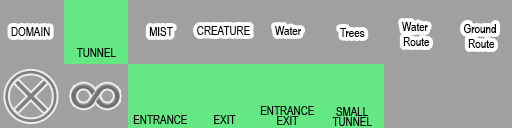
<style>
.page{position:relative;width:512px;height:128px;background:#a0a0a0}
.page>*{position:absolute;margin:0}
.t1{font:12px "ArialNarrow";color:#000000}
.t2{font:66.2px "AppleSymbols";color:#808080}
.t3{font:12px/10px "ArialNarrow";color:#000000}
</style>
<div class="page">
<p class="t1" style="left:11px;top:27px;width:39px;height:9px">DOMAIN</p>
<p class="t1" style="left:149px;top:27px;width:24px;height:9px">MIST</p>
<p class="t1" style="left:197px;top:26px;width:53px;height:9px">CREATURE</p>
<p class="t1" style="left:275px;top:26px;width:27px;height:9px">Water</p>
<p class="t1" style="left:340px;top:28px;width:25px;height:9px">Trees</p>
<p class="t1" style="left:402px;top:22px;width:28px;height:24px;text-align:center">Water <br>Route</p>
<p class="t1" style="left:464px;top:24px;width:32px;height:24px;text-align:center">Ground <br>Route</p>
<p class="t1" style="left:76px;top:48px;width:40px;height:9px">TUNNEL</p>
<p class="t2" style="left:5px;top:70px;width:52px;height:52px">⨂</p>
<p class="t3" style="left:260px;top:106px;width:54px;height:19px;text-align:center">ENTRANCE<br>EXIT</p>
<p class="t3" style="left:332px;top:107px;width:40px;height:19px;text-align:center">SMALL<br>TUNNEL</p>
<p class="t1" style="left:133px;top:115px;width:54px;height:9px">ENTRANCE</p>
<p class="t1" style="left:214px;top:115px;width:22px;height:9px">EXIT</p>
</div>
